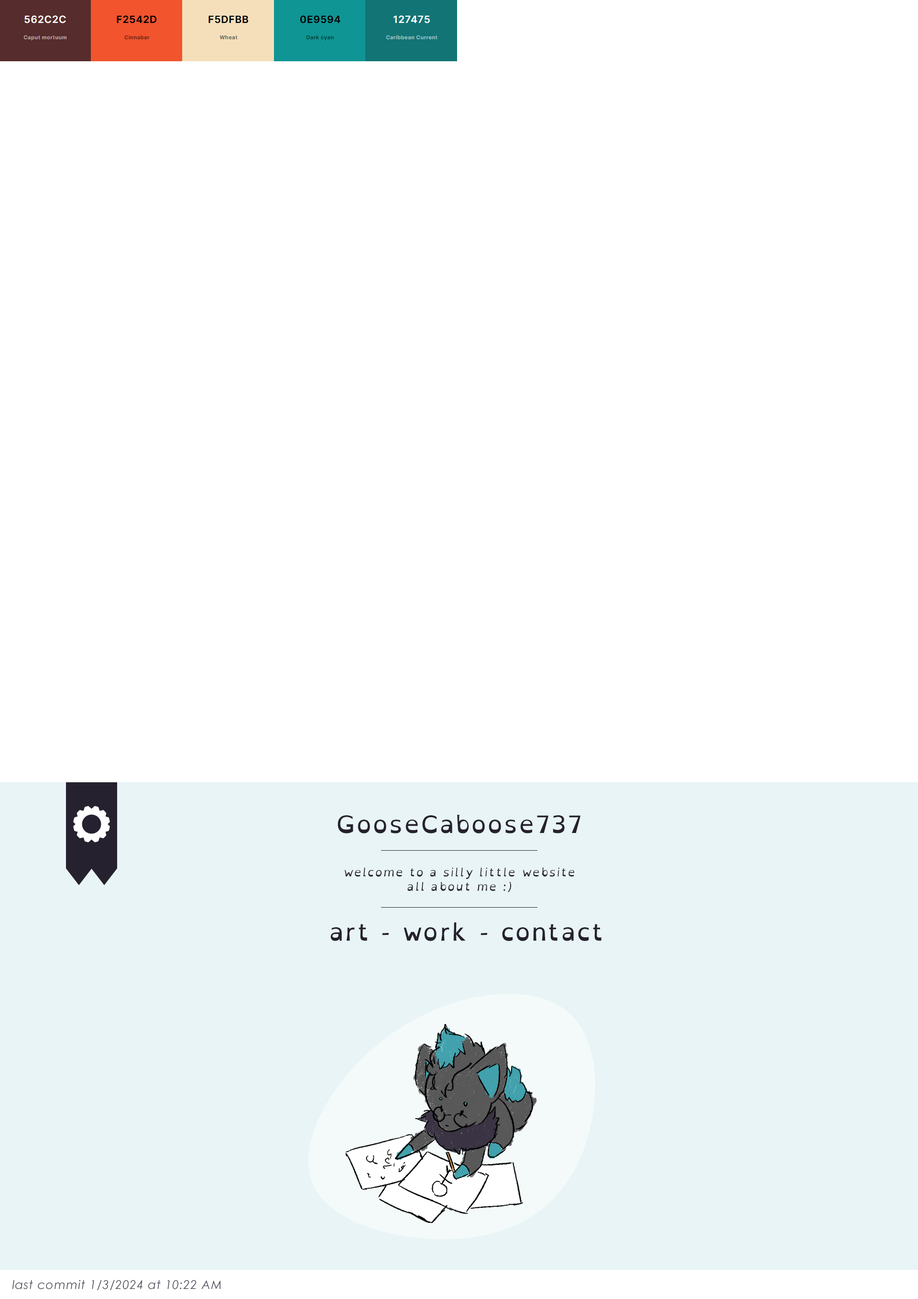
<style>
.page{position:relative;width:918px;height:1299px;background:#ffffff}
.page>*{position:absolute;margin:0}
.t1{font:23.9px "OpenDyslexic-Regular";letter-spacing:0.05em;color:#26212e}
.t2{font:12px "OpenDyslexic-Italic";letter-spacing:0.05em;color:#26212e}
.t3{font:12px "CenturyGothic-Italic";letter-spacing:0.05em;color:#514b5a}
</style>
<div class="page">
<p class="t1" style="left:338px;top:815px;width:243px;height:18px">GooseCaboose737</p>
<p class="t2" style="left:344px;top:867px;width:230px;height:25px;text-align:center">welcome to a silly little website<br>all about me :)</p>
<p class="t1" style="left:330px;top:922px;width:272px;height:19px">art - work - contact</p>
<p class="t3" style="left:12px;top:1279px;width:208px;height:11px">last commit 1/3/2024 at 10:22 AM</p>
</div>
